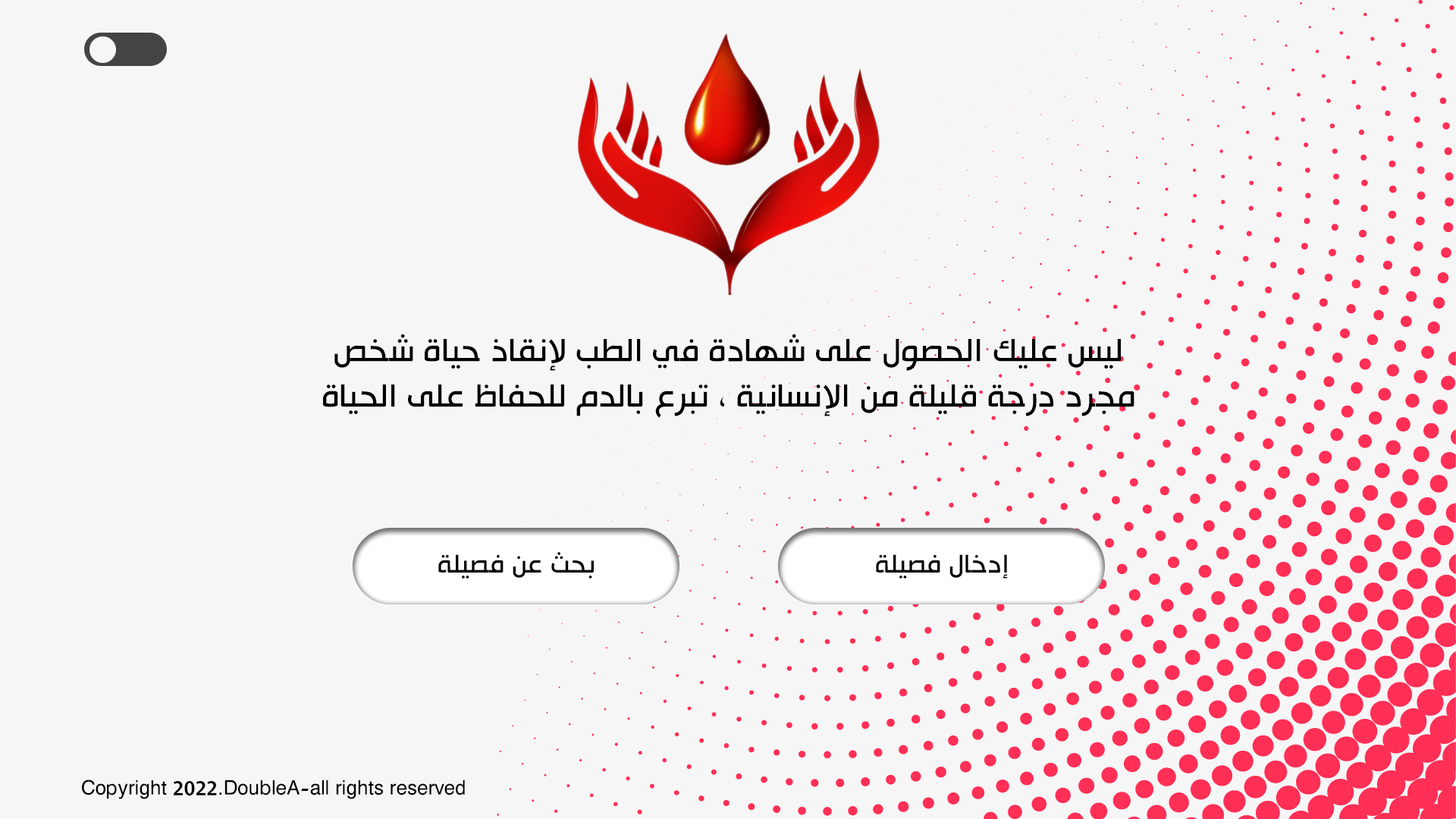
<style>
.page{position:relative;width:1456px;height:819px;background:#f6f6f6}
.page>*{position:absolute;margin:0}
.t1{font:37.9px "HacenTunisiaLt";color:#000000}
.t2{font:30.3px "HacenTunisiaLt";color:#000000}
.t3{font:22.7px "HacenTunisiaLt";color:#000000}
</style>
<div class="page">
<p class="t1" style="left:323px;top:334px;width:811px;height:84px;text-align:center">ليس عليك الحصول على شهادة في الطب لإنقاذ حياة شخص<br>مجرد درجة قليلة من الإنسانية ، تبرع بالدم للحفاظ على الحياة</p>
<p class="t2" style="left:438px;top:552px;width:156px;height:27px">بحث عن فصيلة</p>
<p class="t2" style="left:876px;top:554px;width:132px;height:25px">إدخال فصيلة</p>
<p class="t3" style="left:82px;top:780px;width:383px;height:19px">Copyright 2022.DoubleA-all rights reserved</p>
</div>
